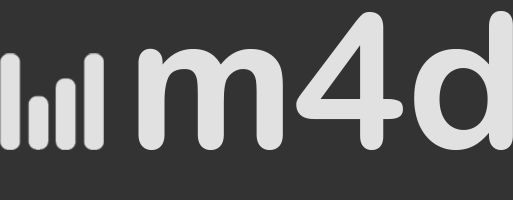
<style>
.page{position:relative;width:513px;height:200px;background:#333333}
.page>*{position:absolute;margin:0}
.t1{font:188.5px "ArialRoundedMTBold";color:#e1e1e1}
</style>
<div class="page">
<p class="t1" style="left:138px;top:11px;width:375px;height:139px">m4d</p>
</div>
